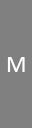
<style>
.page{position:relative;width:32px;height:128px;background:#808080}
.page>*{position:absolute;margin:0}
.t1{font:24px "Calibri";color:#feffff}
</style>
<div class="page">
<p class="t1" style="left:7px;top:57px;width:18px;height:15px">M</p>
</div>
